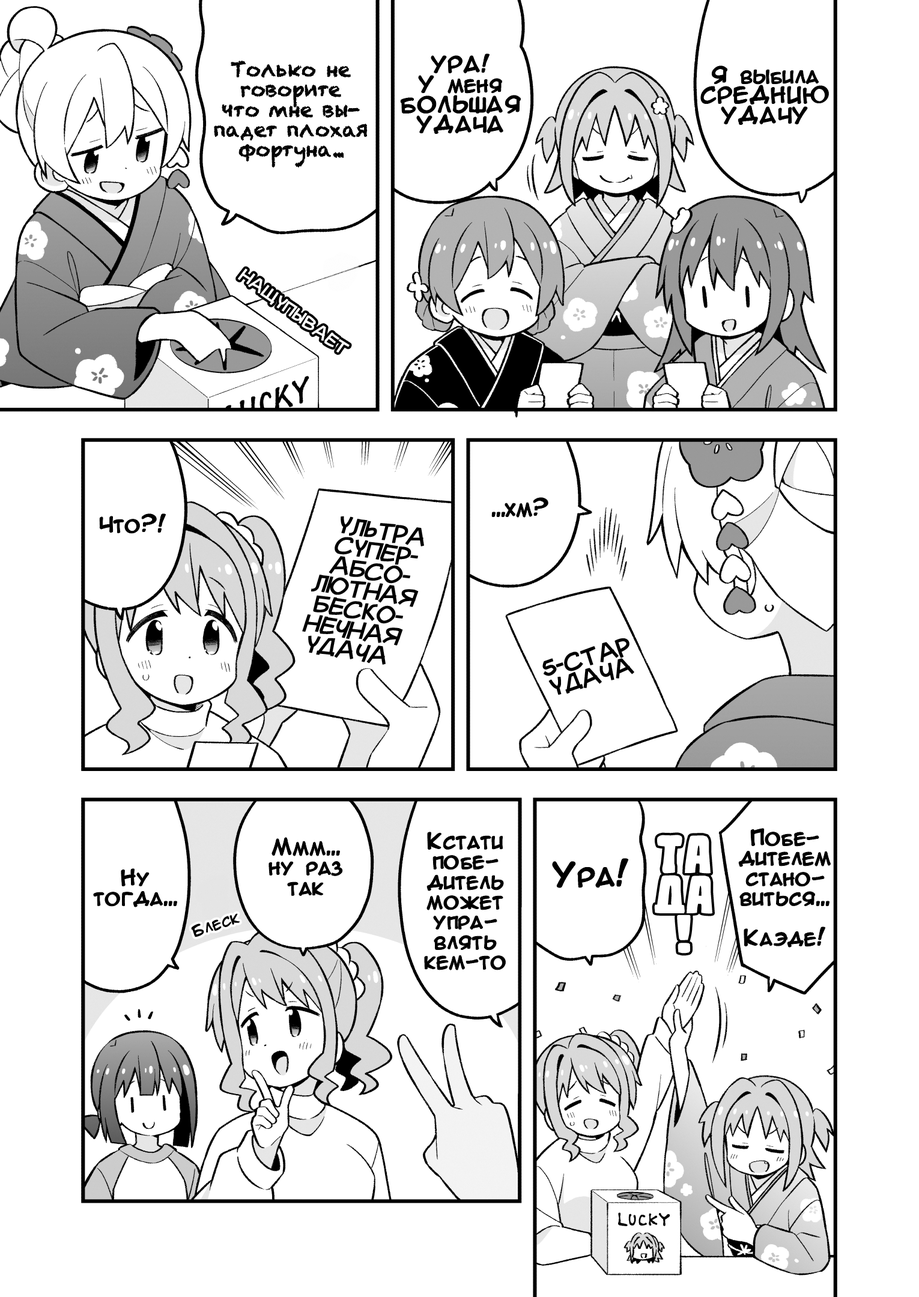
<style>
.page{position:relative;width:919px;height:1297px;background:#ffffff}
.page>*{position:absolute;margin:0}
.t1{font:20px/20px "Chalkduster";color:#000000}
.t2{font:20px/20px "AnimeAcev3";color:#000000;font-weight:bold}
.t3{font:20px "AnimeAcev3";color:#000000;font-weight:bold}
.t4{font:20.7px/20.7px "Mauryssel";color:#000000;font-weight:bold;scale:0.95 1}
.t5{font:20px/20px "Mauryssel";color:#000000;font-weight:bold}
.t6{font:50.1px/40px "GogonoCocoaMochiCyrillic";color:#ffffff;font-weight:bold}
.t7{font:30px "AnimeAcev3";color:#000000;font-weight:bold}
.t8{font:15px "AnimeAcev3";color:#000000;font-weight:bold}
</style>
<div class="page">
<p class="t1" style="left:214px;top:61px;width:153px;height:107px;text-align:center">Только не<br>говорите<br>что мне вы-<br>падет плохая<br>фортуна...</p>
<p class="t2" style="left:401px;top:54px;width:120px;height:80px;text-align:center">УРА!<br>У меня<br>БОЛЬШАЯ<br>УДАЧА</p>
<p class="t2" style="left:701px;top:66px;width:128px;height:59px;text-align:center">Я выбила<br>СРЕДНИЮ<br>УДАЧУ</p>
<p class="t3" style="left:492px;top:498px;width:56px;height:19px">...хм?</p>
<p class="t3" style="left:100px;top:514px;width:66px;height:19px">Что?!</p>
<p class="t4" style="left:302px;top:516px;width:122px;height:149px;text-align:center;rotate:9deg">ультра<br>Супер-<br>абсо-<br>лютная<br>беско-<br>нечная<br>удача</p>
<p class="t5" style="left:542px;top:639px;width:92px;height:56px;text-align:center;rotate:-16deg">5-стар<br>удача</p>
<p class="t2" style="left:425px;top:833px;width:81px;height:137px;text-align:center">Кстати<br>побе-<br>дитель<br>может<br>упра-<br>влять<br>кем-то</p>
<p class="t2" style="left:739px;top:829px;width:92px;height:118px;text-align:center">Побе-<br>дителем<br>стано-<br>виться...<br><br>Каэде!</p>
<p class="t2" style="left:269px;top:838px;width:73px;height:58px;text-align:center">Ммм...<br>ну раз<br>так</p>
<p class="t6" style="left:654px;top:835px;width:58px;height:119px;text-align:center">ТА<br>дА<br>!</p>
<p class="t2" style="left:94px;top:869px;width:83px;height:38px;text-align:center">Ну<br>тогда...</p>
<p class="t7" style="left:553px;top:859px;width:75px;height:29px">Ура!</p>
<p class="t8" style="left:191px;top:914px;width:49px;height:24px;rotate:-17deg">Блеск</p>
</div>
